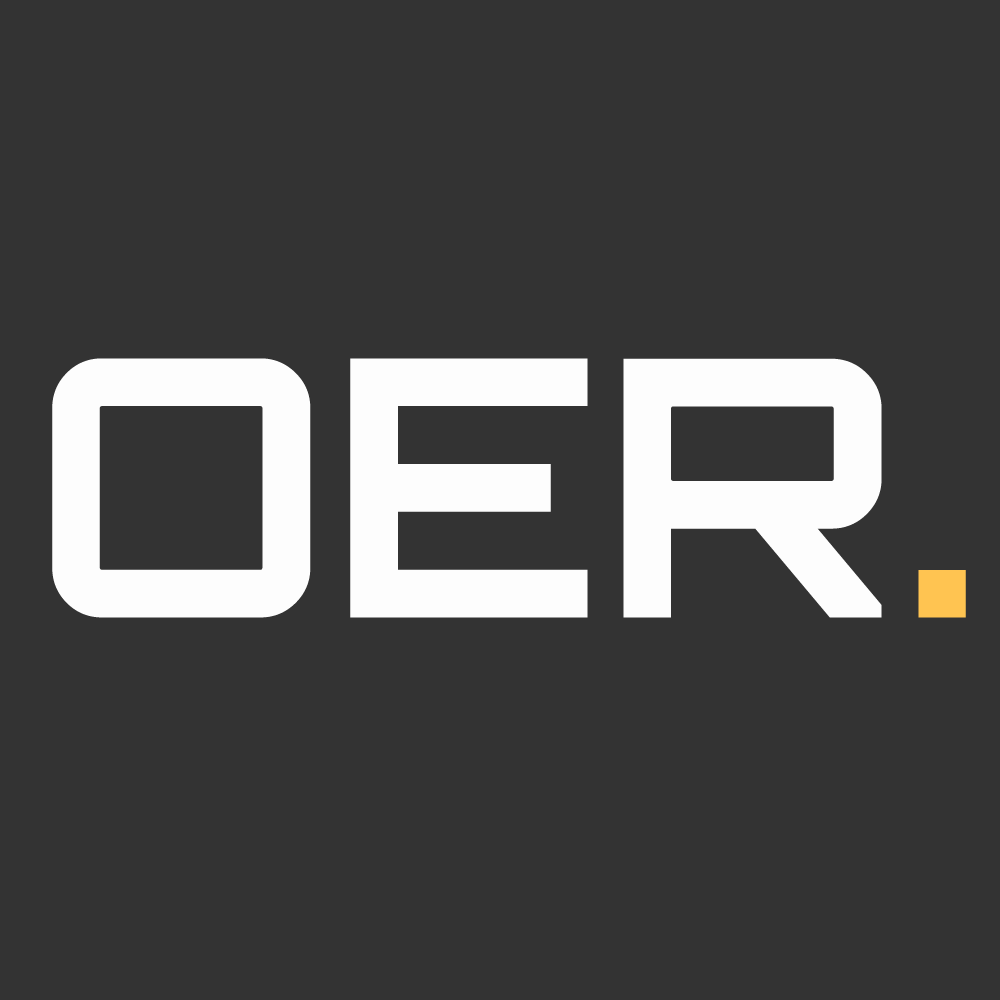
<style>
.page{position:relative;width:1000px;height:1000px;background:#333333}
.page>*{position:absolute;margin:0}
.t1{font:359.5px "Orbitron-Bold";color:#fdfdfd}
.t2{font:359.5px "Orbitron-Bold";color:#ffc451}
</style>
<div class="page">
<p class="t1" style="left:52px;top:358px;width:914px;height:260px">OER<span class="t2">.</span></p>
</div>
